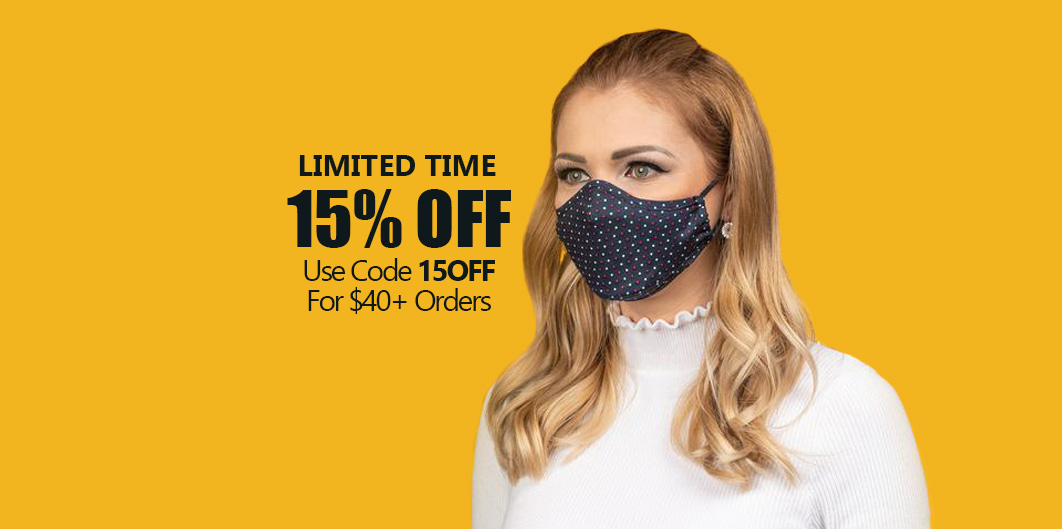
<style>
.page{position:relative;width:1062px;height:529px;background:#f2b51f}
.page>*{position:absolute;margin:0}
.t1{font:30px "Gadugi-Bold";color:#0f181a}
.t2{font:72px "Impact";color:#0f181a}
.t3{font:30px/30px "Gadugi";letter-spacing:-0.075em;color:#0f181a}
.t4{font:30px/30px "Gadugi-Bold";letter-spacing:-0.075em;color:#0f181a}
</style>
<div class="page">
<p class="t1" style="left:299px;top:155px;width:197px;height:21px">LIMITED TIME</p>
<p class="t2" style="left:287px;top:189px;width:224px;height:59px">15% OFF</p>
<p class="t3" style="left:304px;top:258px;width:191px;height:56px;text-align:center">Use Code <span class="t4">15OFF<br></span>For $40+ Orders</p>
</div>
